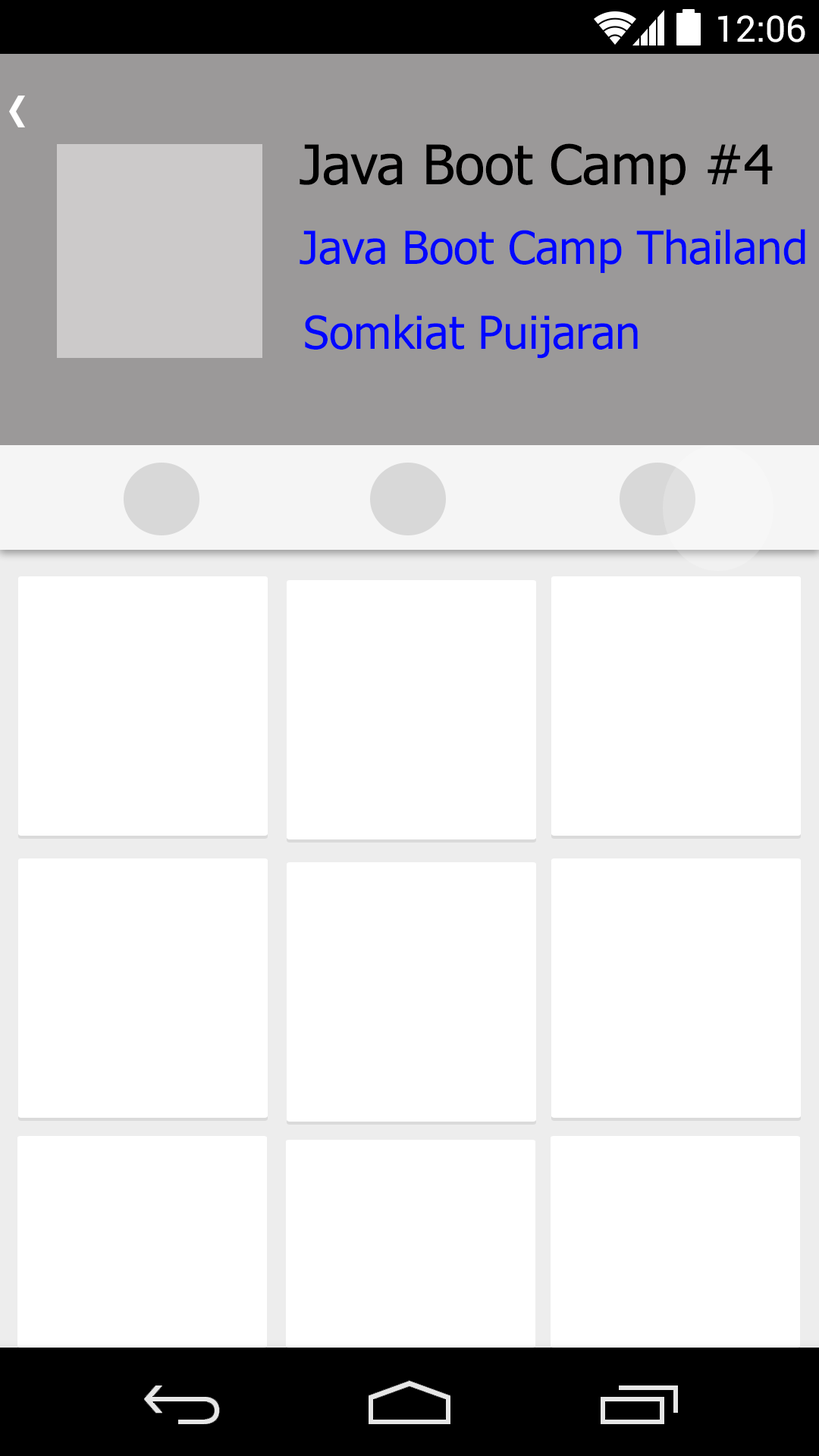
<style>
.page{position:relative;width:819px;height:1456px;background:#ffffff}
.page>*{position:absolute;margin:0}
.t1{font:36.4px "Roboto-Regular";color:#ffffff}
.t2{font:54.6px "Tahoma";color:#000000}
.t3{font:45.5px "Tahoma";color:#0006ff}
</style>
<div class="page">
<p class="t1" style="left:718px;top:15px;width:87px;height:27px">12:06</p>
<p class="t2" style="left:300px;top:143px;width:473px;height:53px">Java Boot Camp #4</p>
<p class="t3" style="left:300px;top:229px;width:505px;height:44px">Java Boot Camp Thailand</p>
<p class="t3" style="left:305px;top:314px;width:333px;height:45px">Somkiat Puijaran</p>
</div>
